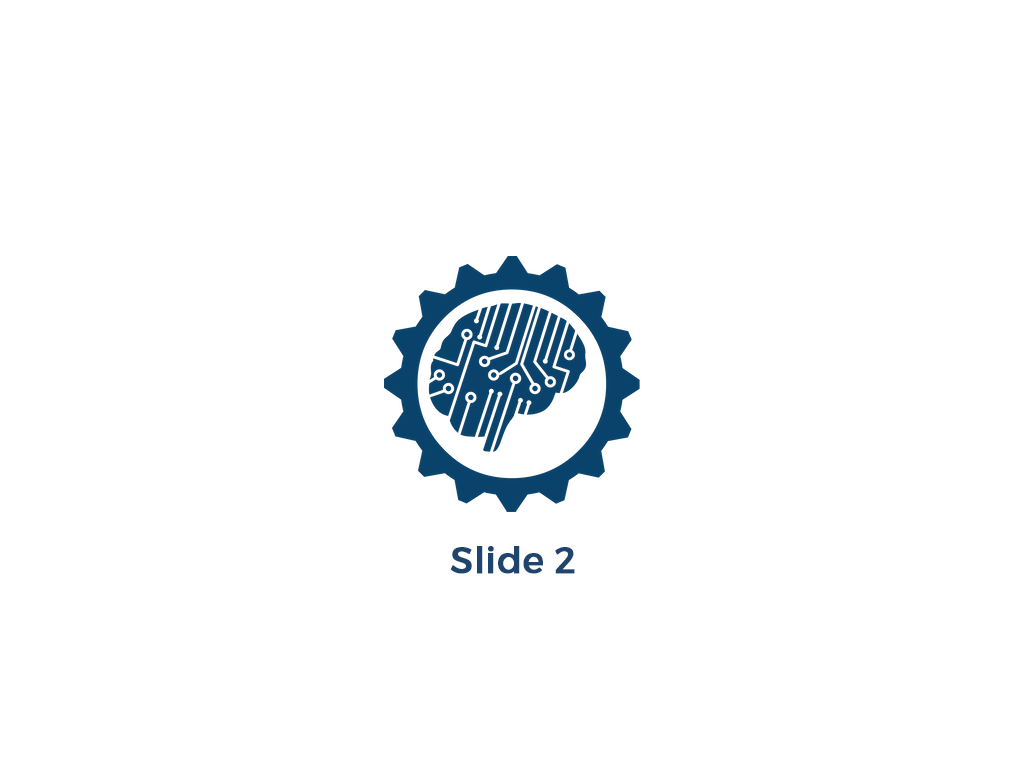
<style>
.page{position:relative;width:1024px;height:768px;background:#ffffff}
.page>*{position:absolute;margin:0}
.t1{font:36px "Montserrat-Regular";color:#1f456e;font-weight:bold}
</style>
<div class="page">
<p class="t1" style="left:450px;top:546px;width:125px;height:28px">Slide 2</p>
</div>
